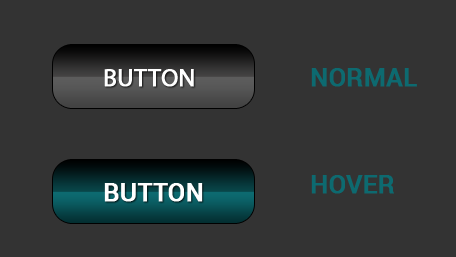
<style>
.page{position:relative;width:456px;height:257px;background:#333333}
.page>*{position:absolute;margin:0}
.t1{font:25px "MyriadPro-Regular";color:#ffffff;text-transform:uppercase;font-weight:bold}
.t2{font:25px "Roboto-Medium";color:#0d6a70;text-transform:uppercase;font-weight:bold}
.t3{font:25px "Roboto-Medium";color:#ffffff;text-transform:uppercase;font-weight:bold}
</style>
<div class="page">
<p class="t1" style="left:104px;top:69px;width:90px;height:18px">Button</p>
<p class="t2" style="left:311px;top:68px;width:106px;height:19px">Normal</p>
<p class="t3" style="left:104px;top:183px;width:99px;height:19px">Button</p>
<p class="t2" style="left:311px;top:175px;width:83px;height:19px">Hover</p>
</div>
